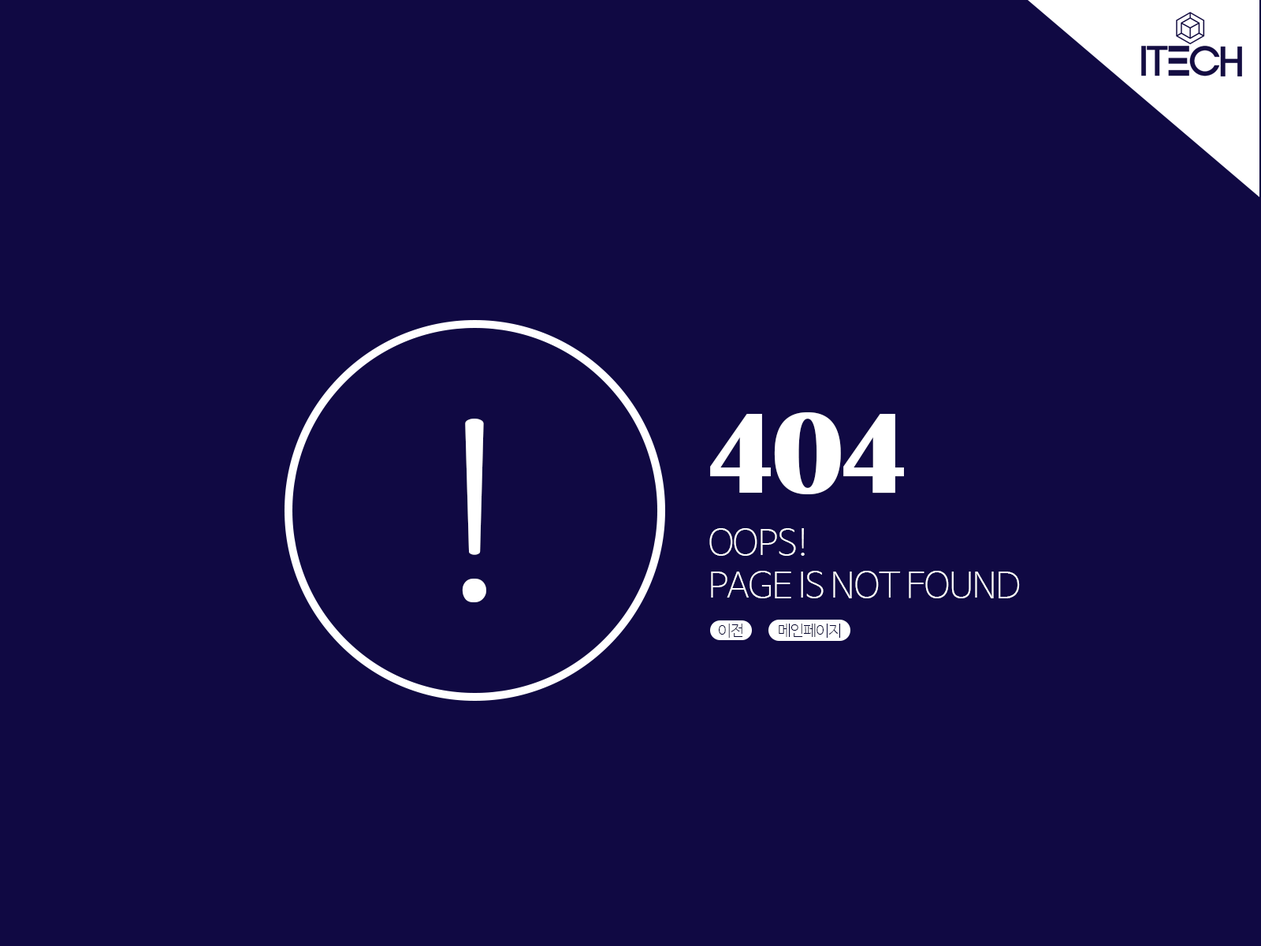
<style>
.page{position:relative;width:1261px;height:946px;background:#100943}
.page>*{position:absolute;margin:0}
.t1{font:118.2px "BritannicBold";letter-spacing:-0.045em;color:#ffffff}
.t2{font:246.2px "HCRBatang";letter-spacing:-0.045em;color:#ffffff}
.t3{font:35.5px "NanumBarunGothicUltraLight";letter-spacing:-0.045em;color:#ffffff}
.t4{font:15px "NanumBarunGothicUltraLight";letter-spacing:-0.045em;color:#070732}
</style>
<div class="page">
<p class="t1" style="left:710px;top:412px;width:194px;height:82px">404</p>
<p class="t2" style="left:462px;top:418px;width:24px;height:184px">!</p>
<p class="t3" style="left:709px;top:528px;width:311px;height:70px">OOPS!<br>PAGE IS NOT FOUND</p>
<p class="t4" style="left:719px;top:623px;width:23px;height:15px">이전</p>
<p class="t4" style="left:779px;top:623px;width:61px;height:15px">메인페이지</p>
</div>
